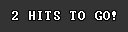
<style>
.page{position:relative;width:128px;height:32px;background:#333333}
.page>*{position:absolute;margin:0}
.t1{font:12px "Terminal";letter-spacing:0.075em;color:#ffffff}
</style>
<div class="page">
<p class="t1" style="left:12px;top:11px;width:104px;height:9px">2 HITS TO GO!</p>
</div>
